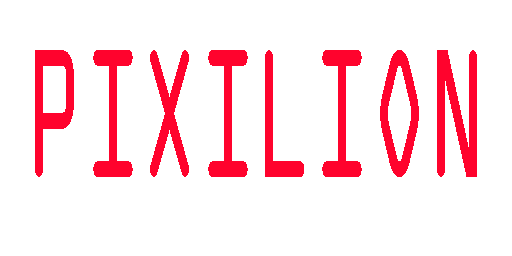
<style>
.page{position:relative;width:512px;height:256px;background:#ffffff}
.page>*{position:absolute;margin:0}
.t1{font:163.2px "OCRAStd";color:#ff032d;scale:0.49 1}
</style>
<div class="page">
<p class="t1" style="left:35px;top:50px;width:442px;height:127px">PIXILION</p>
</div>
